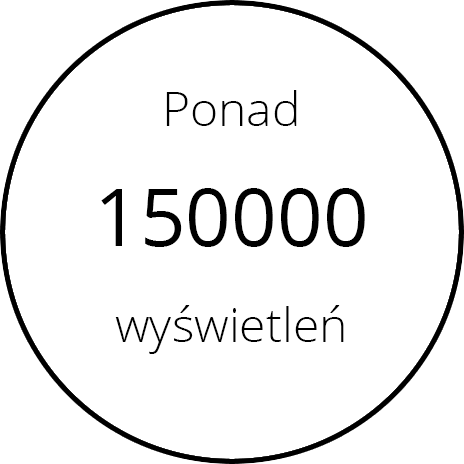
<style>
.page{position:relative;width:464px;height:464px;background:#ffffff}
.page>*{position:absolute;margin:0}
.t1{font:48px/24px "OpenSans-Light";color:#000000}
.t2{font:80px/24px "OpenSans";color:#000000}
</style>
<div class="page">
<p class="t1" style="left:101px;top:90px;width:264px;height:264px;text-align:center">Ponad<br><br><br><br><br><span class="t2">150000<br></span><br><br><br>wyświetleń</p>
</div>
